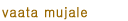
<style>
.page{position:relative;width:128px;height:21px;background:#ffffff}
.page>*{position:absolute;margin:0}
.t1{font:14px "Gulim";letter-spacing:0.05em;color:#996800;font-weight:bold;scale:0.9 1}
</style>
<div class="page">
<p class="t1" style="left:2px;top:7px;width:85px;height:13px">vaata mujale</p>
</div>
